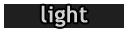
<style>
.page{position:relative;width:128px;height:32px;background:#1f1f1f}
.page>*{position:absolute;margin:0}
.t1{font:22px "TrebuchetMS";color:#d2d2d2;font-weight:bold}
</style>
<div class="page">
<p class="t1" style="left:41px;top:5px;width:47px;height:22px">light</p>
</div>
